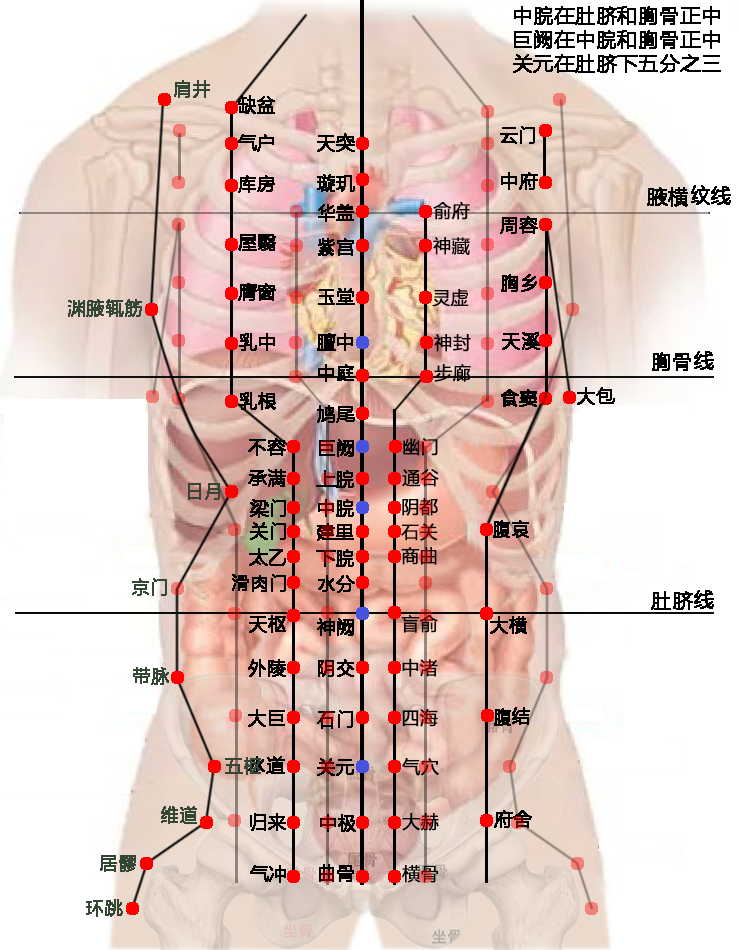
<style>
.page{position:relative;width:738px;height:950px;background:#ffffff}
.page>*{position:absolute;margin:0}
.t1{font:20px "MicrosoftYaHei";color:#000000;font-weight:bold}
.t2{font:18px "MicrosoftYaHeiLight";color:#344734;font-weight:bold}
.t3{font:18px "MicrosoftYaHei";color:#000000;font-weight:bold}
.t4{font:18px "MicrosoftYaHei";font-weight:bold}
</style>
<div class="page">
<p class="t1" style="left:513px;top:6px;width:208px;height:67px">中脘在肚脐和胸骨正中<br>巨阙在中脘和胸骨正中<br>关元在肚脐下五分之三</p>
<p class="t2" style="left:174px;top:80px;width:36px;height:18px">肩井</p>
<p class="t3" style="left:238px;top:95px;width:37px;height:19px">缺盆</p>
<p class="t3" style="left:500px;top:126px;width:35px;height:18px">云门</p>
<p class="t3" style="left:238px;top:134px;width:36px;height:18px">气户</p>
<p class="t3" style="left:317px;top:133px;width:38px;height:19px">天突</p>
<p class="t3" style="left:317px;top:174px;width:38px;height:18px">璇玑</p>
<p class="t3" style="left:501px;top:172px;width:37px;height:18px">中府</p>
<p class="t3" style="left:238px;top:175px;width:37px;height:18px">库房</p>
<p class="t1" style="left:647px;top:185px;width:84px;height:22px">腋横纹线</p>
<p class="t3" style="left:318px;top:204px;width:36px;height:18px">华盖</p>
<p class="t3" style="left:433px;top:201px;width:37px;height:19px">俞府</p>
<p class="t3" style="left:500px;top:216px;width:38px;height:18px">周容</p>
<p class="t3" style="left:238px;top:234px;width:38px;height:17px">屋翳</p>
<p class="t3" style="left:318px;top:238px;width:36px;height:18px">紫宫</p>
<p class="t3" style="left:433px;top:237px;width:37px;height:18px">神藏</p>
<p class="t3" style="left:501px;top:274px;width:36px;height:18px">胸乡</p>
<p class="t3" style="left:238px;top:283px;width:38px;height:18px">膺窗</p>
<p class="t3" style="left:318px;top:288px;width:37px;height:17px">玉堂</p>
<p class="t3" style="left:432px;top:289px;width:37px;height:18px">灵虚</p>
<p class="t2" style="left:68px;top:299px;width:74px;height:18px">渊腋辄筋</p>
<p class="t3" style="left:239px;top:333px;width:36px;height:18px">乳中</p>
<p class="t3" style="left:317px;top:333px;width:36px;height:18px">膻中</p>
<p class="t3" style="left:434px;top:334px;width:37px;height:18px">神封</p>
<p class="t3" style="left:502px;top:332px;width:38px;height:18px">天溪</p>
<p class="t1" style="left:652px;top:351px;width:62px;height:20px">胸骨线</p>
<p class="t3" style="left:318px;top:364px;width:36px;height:18px">中庭</p>
<p class="t3" style="left:434px;top:364px;width:37px;height:18px">步廊</p>
<p class="t3" style="left:501px;top:389px;width:36px;height:18px">食窦</p>
<p class="t3" style="left:577px;top:387px;width:38px;height:18px">大包</p>
<p class="t3" style="left:239px;top:392px;width:37px;height:18px">乳根</p>
<p class="t3" style="left:317px;top:405px;width:38px;height:18px">鸠尾</p>
<p class="t3" style="left:248px;top:438px;width:38px;height:18px">不容</p>
<p class="t3" style="left:403px;top:438px;width:35px;height:18px">幽门</p>
<p class="t3" style="left:319px;top:439px;width:35px;height:18px">巨阙</p>
<p class="t3" style="left:248px;top:469px;width:38px;height:18px">承满</p>
<p class="t3" style="left:316px;top:470px;width:38px;height:18px">上脘</p>
<p class="t3" style="left:402px;top:469px;width:37px;height:18px">通谷</p>
<p class="t2" style="left:188px;top:483px;width:32px;height:17px">日月</p>
<p class="t3" style="left:250px;top:499px;width:36px;height:19px">梁门</p>
<p class="t3" style="left:318px;top:499px;width:36px;height:18px">中脘</p>
<p class="t3" style="left:402px;top:498px;width:36px;height:18px">阴都</p>
<p class="t3" style="left:493px;top:520px;width:36px;height:18px">腹哀</p>
<p class="t3" style="left:250px;top:522px;width:36px;height:18px">关门</p>
<p class="t3" style="left:317px;top:523px;width:37px;height:18px">建里</p>
<p class="t4" style="left:401px;top:523px;width:37px;height:18px">石关</p>
<p class="t3" style="left:249px;top:548px;width:37px;height:18px">太乙</p>
<p class="t3" style="left:316px;top:549px;width:38px;height:18px">下脘</p>
<p class="t3" style="left:401px;top:547px;width:36px;height:18px">商曲</p>
<p class="t2" style="left:132px;top:578px;width:35px;height:18px">京门</p>
<p class="t3" style="left:232px;top:574px;width:54px;height:18px">滑肉门</p>
<p class="t3" style="left:318px;top:575px;width:37px;height:18px">水分</p>
<p class="t1" style="left:651px;top:590px;width:63px;height:20px">肚脐线</p>
<p class="t3" style="left:249px;top:615px;width:37px;height:18px">天枢</p>
<p class="t3" style="left:401px;top:614px;width:37px;height:19px">盲俞</p>
<p class="t3" style="left:490px;top:616px;width:37px;height:18px">大横</p>
<p class="t3" style="left:317px;top:618px;width:37px;height:18px">神阙</p>
<p class="t3" style="left:248px;top:659px;width:38px;height:18px">外陵</p>
<p class="t3" style="left:318px;top:659px;width:36px;height:18px">阴交</p>
<p class="t3" style="left:402px;top:658px;width:36px;height:19px">中渚</p>
<p class="t2" style="left:133px;top:667px;width:36px;height:18px">带脉</p>
<p class="t3" style="left:248px;top:709px;width:37px;height:18px">大巨</p>
<p class="t3" style="left:317px;top:710px;width:36px;height:19px">石门</p>
<p class="t3" style="left:402px;top:709px;width:36px;height:18px">四海</p>
<p class="t3" style="left:494px;top:707px;width:36px;height:19px">腹结</p>
<p class="t2" style="left:225px;top:757px;width:36px;height:18px">五枢</p>
<p class="t3" style="left:248px;top:756px;width:37px;height:18px">水道</p>
<p class="t3" style="left:317px;top:758px;width:37px;height:18px">关元</p>
<p class="t3" style="left:402px;top:758px;width:37px;height:18px">气穴</p>
<p class="t2" style="left:161px;top:806px;width:36px;height:18px">维道</p>
<p class="t3" style="left:250px;top:813px;width:36px;height:18px">归来</p>
<p class="t3" style="left:320px;top:814px;width:36px;height:18px">中极</p>
<p class="t3" style="left:402px;top:813px;width:37px;height:18px">大赫</p>
<p class="t3" style="left:494px;top:810px;width:38px;height:18px">府舍</p>
<p class="t2" style="left:100px;top:855px;width:36px;height:17px">居髎</p>
<p class="t3" style="left:250px;top:865px;width:36px;height:18px">气冲</p>
<p class="t3" style="left:319px;top:864px;width:35px;height:18px">曲骨</p>
<p class="t3" style="left:402px;top:865px;width:36px;height:18px">横骨</p>
<p class="t2" style="left:86px;top:899px;width:37px;height:18px">环跳</p>
</div>
